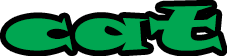
<style>
.page{position:relative;width:227px;height:56px;background:#00a651}
.page>*{position:absolute;margin:0}
.t1{font:60px "SnapITC-Regular";color:#00a651;scale:2 1}
</style>
<div class="page">
<p class="t1" style="left:5px;top:5px;width:217px;height:46px">cat</p>
</div>
